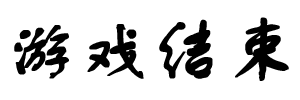
<style>
.page{position:relative;width:300px;height:100px;background:#ffffff}
.page>*{position:absolute;margin:0}
.t1{font:72px "FZSTK--GBK1-0";color:#000000;font-weight:bold}
</style>
<div class="page">
<p class="t1" style="left:14px;top:17px;width:275px;height:64px">游戏结束</p>
</div>
